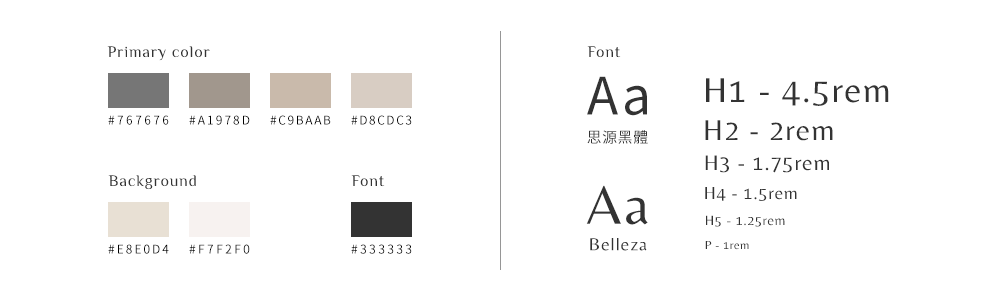
<style>
.page{position:relative;width:1000px;height:300px;background:#ffffff}
.page>*{position:absolute;margin:0}
.t1{font:16px "Philosopher-Regular";letter-spacing:0.05em;color:#333333}
.t2{font:51.6px "NotoSansCJKtc-Regular";letter-spacing:0.05em;color:#333333}
.t3{font:36px "Belleza-Regular";letter-spacing:0.04em;color:#333333}
.t4{font:12px "NotoSansCJKtc-Regular";letter-spacing:0.05em;color:#010101;text-transform:uppercase}
.t5{font:30px "Belleza-Regular";letter-spacing:0.04em;color:#333333}
.t6{font:14.7px "NotoSansCJKtc-Regular";letter-spacing:0.05em;color:#333333}
.t7{font:22px "Belleza-Regular";letter-spacing:0.04em;color:#333333}
.t8{font:56px "Belleza-Regular";letter-spacing:0.05em;color:#333333}
.t9{font:18px "Belleza-Regular";letter-spacing:0.04em;color:#333333}
.t10{font:14px "Belleza-Regular";letter-spacing:0.04em;color:#333333}
.t11{font:18px "Belleza-Regular";letter-spacing:0.05em;color:#333333}
.t12{font:12px "Belleza-Regular";letter-spacing:0.04em;color:#333333}
</style>
<div class="page">
<p class="t1" style="left:107px;top:46px;width:103px;height:15px">Primary color</p>
<p class="t1" style="left:587px;top:46px;width:34px;height:12px">Font</p>
<p class="t2" style="left:587px;top:76px;width:60px;height:40px">Aa</p>
<p class="t3" style="left:706px;top:78px;width:183px;height:28px">H1 - 4.5rem</p>
<p class="t4" style="left:108px;top:115px;width:61px;height:10px">#767676</p>
<p class="t4" style="left:189px;top:115px;width:61px;height:10px">#a1978d</p>
<p class="t4" style="left:270px;top:115px;width:61px;height:10px">#C9BAAB</p>
<p class="t4" style="left:351px;top:115px;width:61px;height:10px">#D8CDC3</p>
<p class="t5" style="left:705px;top:120px;width:128px;height:21px">H2 - 2rem</p>
<p class="t6" style="left:587px;top:130px;width:61px;height:14px">思源黑體</p>
<p class="t7" style="left:705px;top:155px;width:124px;height:18px">H3 - 1.75rem</p>
<p class="t1" style="left:108px;top:175px;width:88px;height:15px">Background</p>
<p class="t1" style="left:351px;top:175px;width:34px;height:12px">Font</p>
<p class="t8" style="left:586px;top:185px;width:62px;height:40px">Aa</p>
<p class="t9" style="left:705px;top:187px;width:92px;height:14px">H4 - 1.5rem</p>
<p class="t10" style="left:706px;top:215px;width:79px;height:12px">H5 - 1.25rem</p>
<p class="t4" style="left:108px;top:244px;width:61px;height:10px">#E8E0D4</p>
<p class="t4" style="left:189px;top:244px;width:61px;height:10px">#f7f2f0</p>
<p class="t4" style="left:351px;top:244px;width:61px;height:10px">#333333</p>
<p class="t11" style="left:590px;top:238px;width:57px;height:13px">Belleza</p>
<p class="t12" style="left:705px;top:241px;width:44px;height:9px">P - 1rem</p>
</div>
